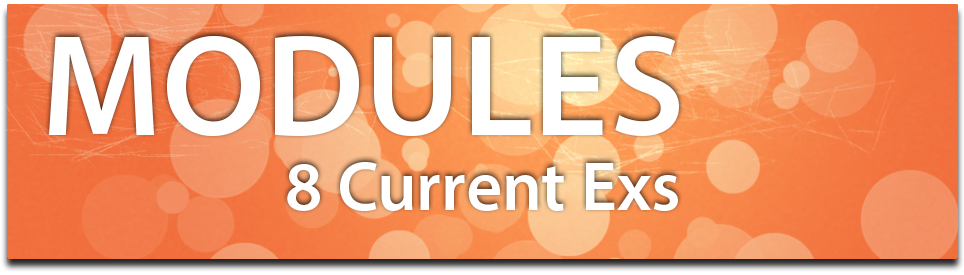
<style>
.page{position:relative;width:964px;height:275px}
.page>*{position:absolute;margin:0}
.t1{font:146px "MyriadPro-Semibold";color:#ffffff}
.t2{font:70px "MyriadPro-Semibold";color:#ffffff}
</style>
<div class="page">
<p class="t1" style="left:49px;top:36px;width:630px;height:101px">MODULES</p>
<p class="t2" style="left:287px;top:162px;width:391px;height:49px">8 Current Exs</p>
</div>
